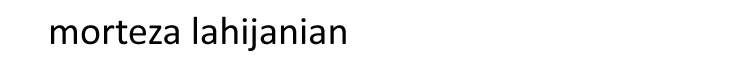
<style>
.page{position:relative;width:750px;height:70px;background:#ffffff}
.page>*{position:absolute;margin:0}
.t1{font:40px "Calibri";color:#020202}
</style>
<div class="page">
<p class="t1" style="left:51px;top:16px;width:295px;height:35px">morteza lahijanian</p>
</div>
